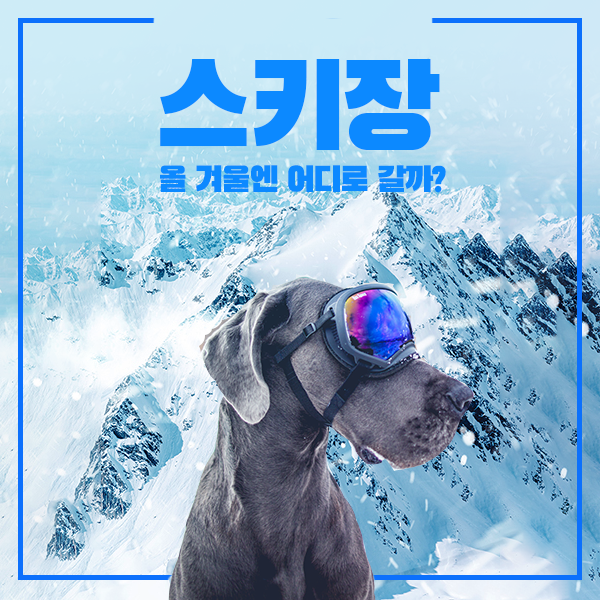
<style>
.page{position:relative;width:600px;height:600px}
.page>*{position:absolute;margin:0}
.t1{font:120px "BlackHanSans-Regular";letter-spacing:-0.05em;color:#0c89ff}
.t2{font:35px "BlackHanSans-Regular";letter-spacing:-0.05em;color:#0c89ff}
</style>
<div class="page">
<p class="t1" style="left:160px;top:59px;width:280px;height:91px">스키장</p>
<p class="t2" style="left:160px;top:165px;width:286px;height:28px">올 겨울엔 어디로 갈까?</p>
</div>
